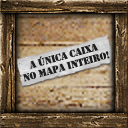
<style>
.page{position:relative;width:128px;height:128px}
.page>*{position:absolute;margin:0}
.t1{font:10.5px/10.7px "Army";letter-spacing:-0.02em;color:#1e1e1e}
</style>
<div class="page">
<p class="t1" style="left:22px;top:43px;width:88px;height:39px;text-align:center;rotate:-15deg">A ÚNICA CAIXA<br>NO MAPA INTEIRO!</p>
</div>
